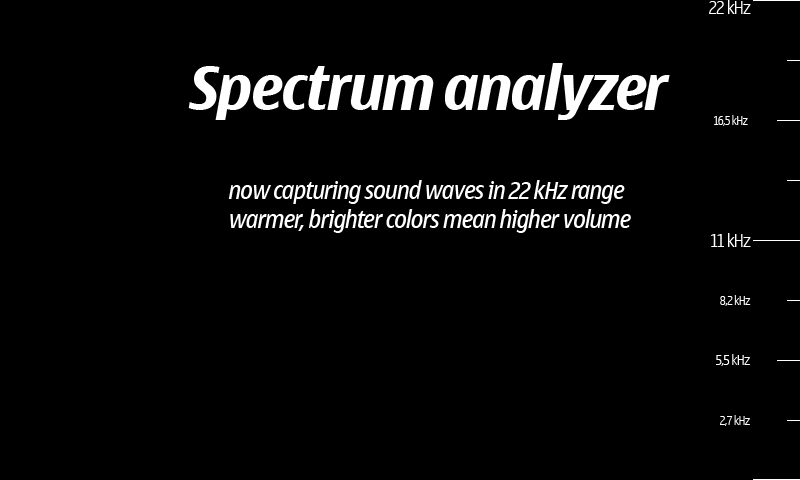
<style>
.page{position:relative;width:800px;height:480px;background:#000000}
.page>*{position:absolute;margin:0}
.t1{font:18px "NokiaLargeMultiscriptLight";color:#ffffff}
.t2{font:60px "NokiaLargeMultiscript-BoldItalic";color:#ffffff}
.t3{font:12px "NokiaLargeMultiscriptLight";color:#ffffff}
.t4{font:24px "NokiaLargeMultiscript-Italic";color:#ffffff}
.t5{font:14px "NokiaLargeMultiscriptLight";color:#ffffff}
</style>
<div class="page">
<p class="t1" style="left:709px;top:0px;width:42px;height:14px">22 kHz</p>
<p class="t2" style="left:188px;top:63px;width:482px;height:57px">Spectrum analyzer</p>
<p class="t3" style="left:714px;top:115px;width:34px;height:11px">16,5 kHz</p>
<p class="t4" style="left:228px;top:180px;width:403px;height:53px">now capturing sound waves in 22 kHz range<br>warmer, brighter colors mean higher volume</p>
<p class="t1" style="left:711px;top:233px;width:40px;height:14px">11 kHz</p>
<p class="t3" style="left:720px;top:295px;width:31px;height:11px">8,2 kHz</p>
<p class="t5" style="left:716px;top:354px;width:34px;height:12px">5,5 kHz</p>
<p class="t3" style="left:720px;top:415px;width:30px;height:11px">2,7 kHz</p>
</div>
